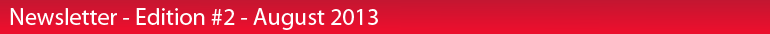
<style>
.page{position:relative;width:770px;height:34px}
.page>*{position:absolute;margin:0}
.t1{font:24px "MyriadPro-Regular";color:#ffffff}
</style>
<div class="page">
<p class="t1" style="left:10px;top:8px;width:368px;height:22px">Newsletter - Edition #2 - August 2013</p>
</div>
